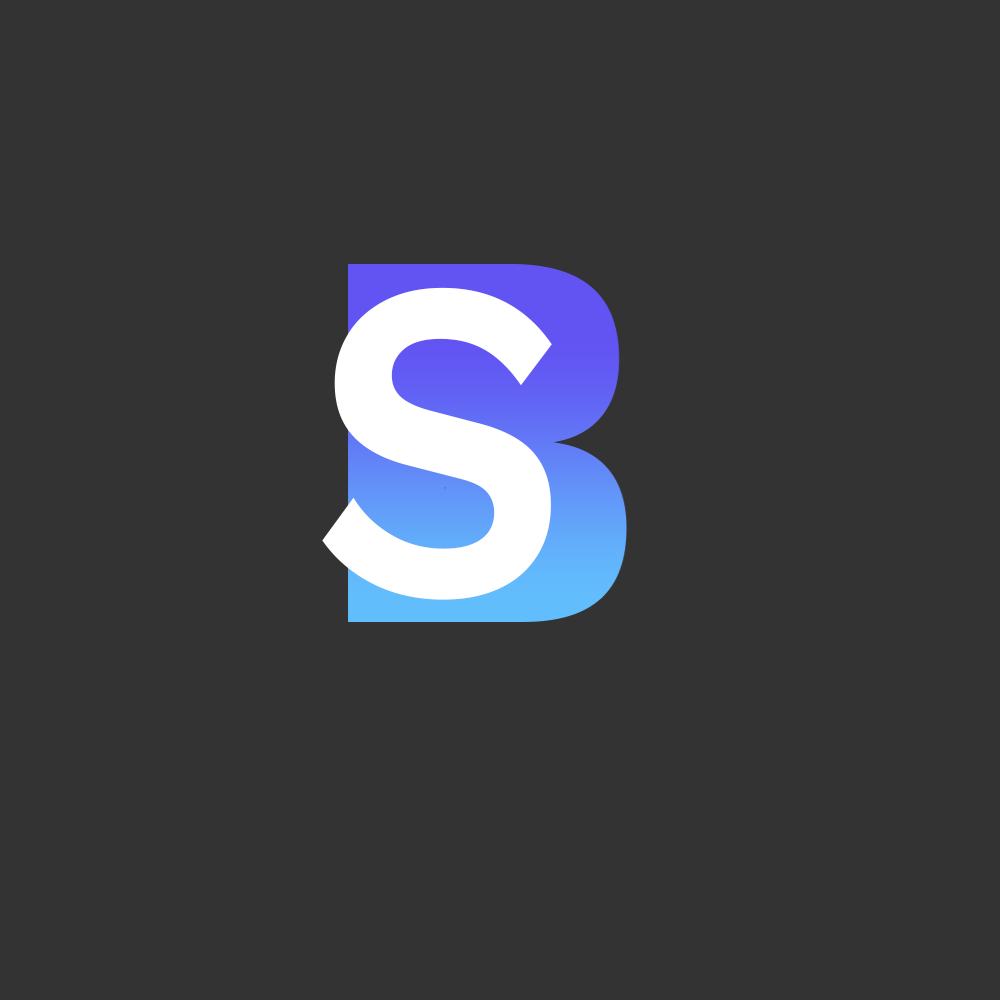
<style>
.page{position:relative;width:1000px;height:1000px;background:#333333}
.page>*{position:absolute;margin:0}
.t1{font:458.3px "WorkSans-SemiBold";letter-spacing:-0.05em;color:#ffffff;text-transform:uppercase;scale:0.87 1}
</style>
<div class="page">
<p class="t1" style="left:322px;top:287px;width:230px;height:313px">s</p>
</div>
